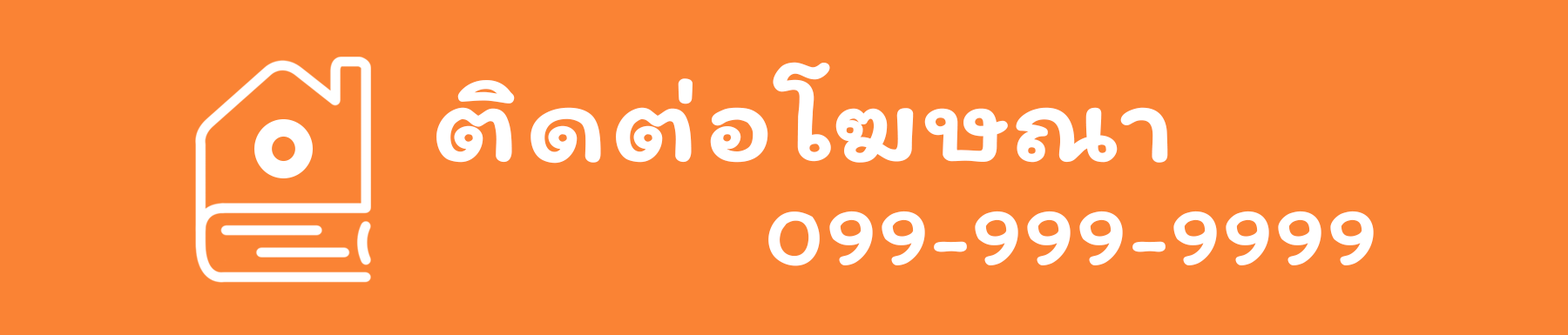
<style>
.page{position:relative;width:1568px;height:335px;background:#fa8334}
.page>*{position:absolute;margin:0}
.t1{font:112.1px "Itim-Regular";color:#ffffff;font-weight:bold;scale:1.14 1}
.t2{font:83.6px "Itim-Regular";color:#ffffff;font-weight:bold;scale:1.14 1}
</style>
<div class="page">
<p class="t1" style="left:436px;top:62px;width:732px;height:102px">ติดต่อโฆษณา</p>
<p class="t2" style="left:768px;top:211px;width:606px;height:56px">099-999-9999</p>
</div>
